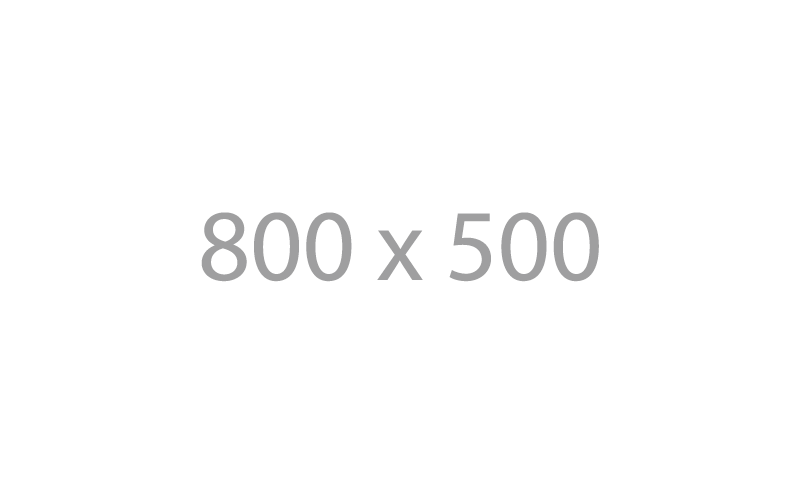
<style>
.page{position:relative;width:800px;height:500px;background:#ffffff}
.page>*{position:absolute;margin:0}
.t1{font:102px "MyriadPro-Regular";color:#9f9fa0}
</style>
<div class="page">
<p class="t1" style="left:201px;top:212px;width:398px;height:70px">800 x 500</p>
</div>
